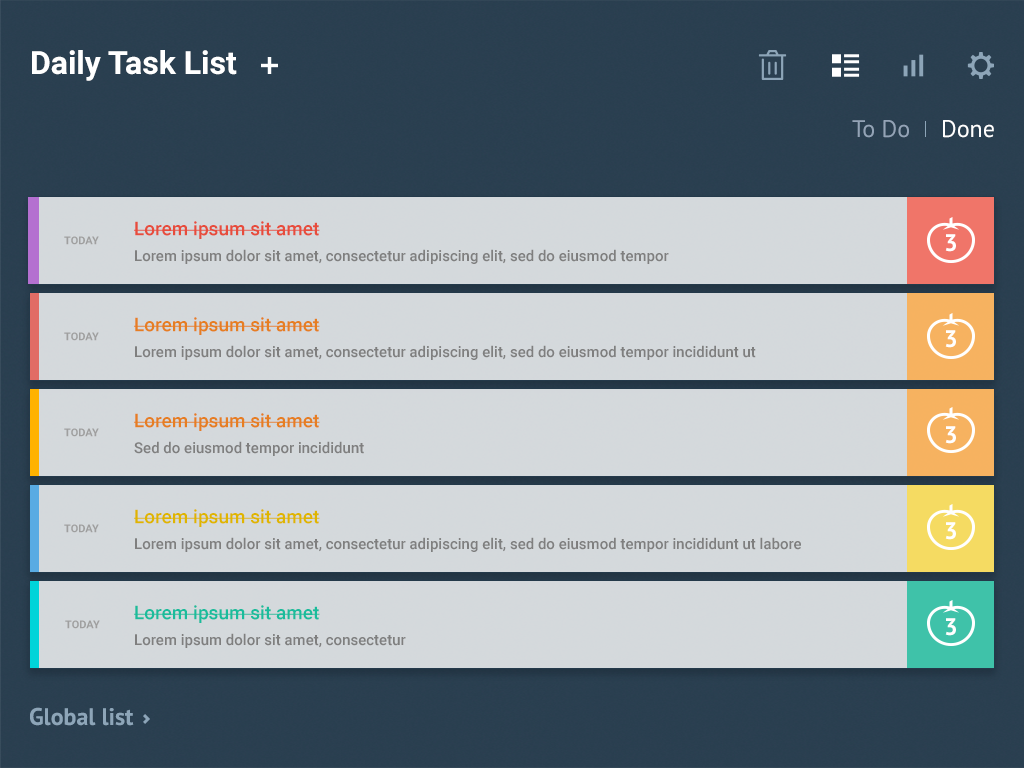
<style>
.page{position:relative;width:1024px;height:768px;background:#d4d9dc}
.page>*{position:absolute;margin:0}
.t1{font:32px "Roboto-Bold";color:#ffffff}
.t2{font:24px "PTSans-Regular";color:#93a3b6}
.t3{font:24px "PTSans-Regular";color:#ffffff}
.t4{font:19px "Roboto-Medium";color:#e74c3c}
.t5{font:11px "Roboto-Bold";color:#9f9f9f}
.t6{font:24px "PTSans-Bold";color:#ffffff}
.t7{font:15px "Roboto-Medium";color:#7f7f7f}
.t8{font:19px "Roboto-Medium";color:#e67e22}
.t9{font:19px "Roboto-Medium";color:#dfb500}
.t10{font:19px "Roboto-Medium";color:#1abc9c}
.t11{font:24px "PTSans-Bold";color:#8da5b8}
</style>
<div class="page">
<p class="t1" style="left:32px;top:50px;width:205px;height:31px">Daily Task List</p>
<p class="t2" style="left:852px;top:120px;width:57px;height:18px">To Do</p>
<p class="t3" style="left:943px;top:120px;width:51px;height:18px">Done</p>
<p class="t4" style="left:134px;top:221px;width:186px;height:18px">Lorem ipsum sit amet</p>
<p class="t5" style="left:64px;top:236px;width:35px;height:9px">TODAY</p>
<p class="t6" style="left:945px;top:234px;width:11px;height:18px">3</p>
<p class="t7" style="left:135px;top:249px;width:534px;height:15px">Lorem ipsum dolor sit amet, consectetur adipiscing elit, sed do eiusmod tempor</p>
<p class="t8" style="left:134px;top:317px;width:186px;height:18px">Lorem ipsum sit amet</p>
<p class="t5" style="left:64px;top:332px;width:35px;height:9px">TODAY</p>
<p class="t6" style="left:945px;top:330px;width:11px;height:18px">3</p>
<p class="t7" style="left:135px;top:345px;width:621px;height:15px">Lorem ipsum dolor sit amet, consectetur adipiscing elit, sed do eiusmod tempor incididunt ut</p>
<p class="t8" style="left:134px;top:413px;width:186px;height:18px">Lorem ipsum sit amet</p>
<p class="t5" style="left:64px;top:428px;width:35px;height:9px">TODAY</p>
<p class="t6" style="left:945px;top:426px;width:11px;height:18px">3</p>
<p class="t7" style="left:134px;top:441px;width:230px;height:15px">Sed do eiusmod tempor incididunt</p>
<p class="t9" style="left:134px;top:509px;width:186px;height:18px">Lorem ipsum sit amet</p>
<p class="t5" style="left:64px;top:524px;width:35px;height:9px">TODAY</p>
<p class="t6" style="left:945px;top:522px;width:11px;height:18px">3</p>
<p class="t7" style="left:135px;top:537px;width:666px;height:15px">Lorem ipsum dolor sit amet, consectetur adipiscing elit, sed do eiusmod tempor incididunt ut labore</p>
<p class="t10" style="left:134px;top:605px;width:186px;height:18px">Lorem ipsum sit amet</p>
<p class="t5" style="left:65px;top:620px;width:35px;height:9px">TODAY</p>
<p class="t6" style="left:945px;top:618px;width:11px;height:18px">3</p>
<p class="t7" style="left:135px;top:633px;width:271px;height:15px">Lorem ipsum dolor sit amet, consectetur</p>
<p class="t11" style="left:30px;top:707px;width:104px;height:19px">Global list</p>
</div>
